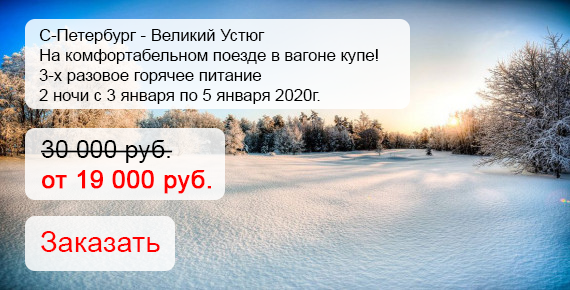
<style>
.page{position:relative;width:570px;height:290px}
.page>*{position:absolute;margin:0}
.t1{font:16.7px "ArialMT";color:#000000}
.t2{font:25px "ArialMT";color:#ff0000;font-weight:bold}
.t3{font:25px "ArialMT";color:#000000}
.t4{font:29.2px "ArialMT";color:#ff0000}
</style>
<div class="page">
<p class="t1" style="left:39px;top:29px;width:339px;height:75px">С-Петербург - Великий Устюг<br>На комфортабельном поезде в вагоне купе!<br>3-х разовое горячее питание <br>2 ночи с 3 января по 5 января 2020г.</p>
<p class="t2" style="left:41px;top:140px;width:170px;height:54px"><span class="t3">30 000 руб.<br></span>от 19 000 руб.</p>
<p class="t4" style="left:41px;top:231px;width:119px;height:21px">Заказать</p>
</div>
